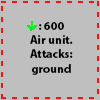
<style>
.page{position:relative;width:100px;height:100px;background:#bfbfbf}
.page>*{position:absolute;margin:0}
.t1{font:12px "MyriadPro-Bold";color:#000000}
</style>
<div class="page">
<p class="t1" style="left:30px;top:22px;width:43px;height:53px;text-align:center">: 600<br>Air unit.<br>Attacks: ground</p>
</div>
